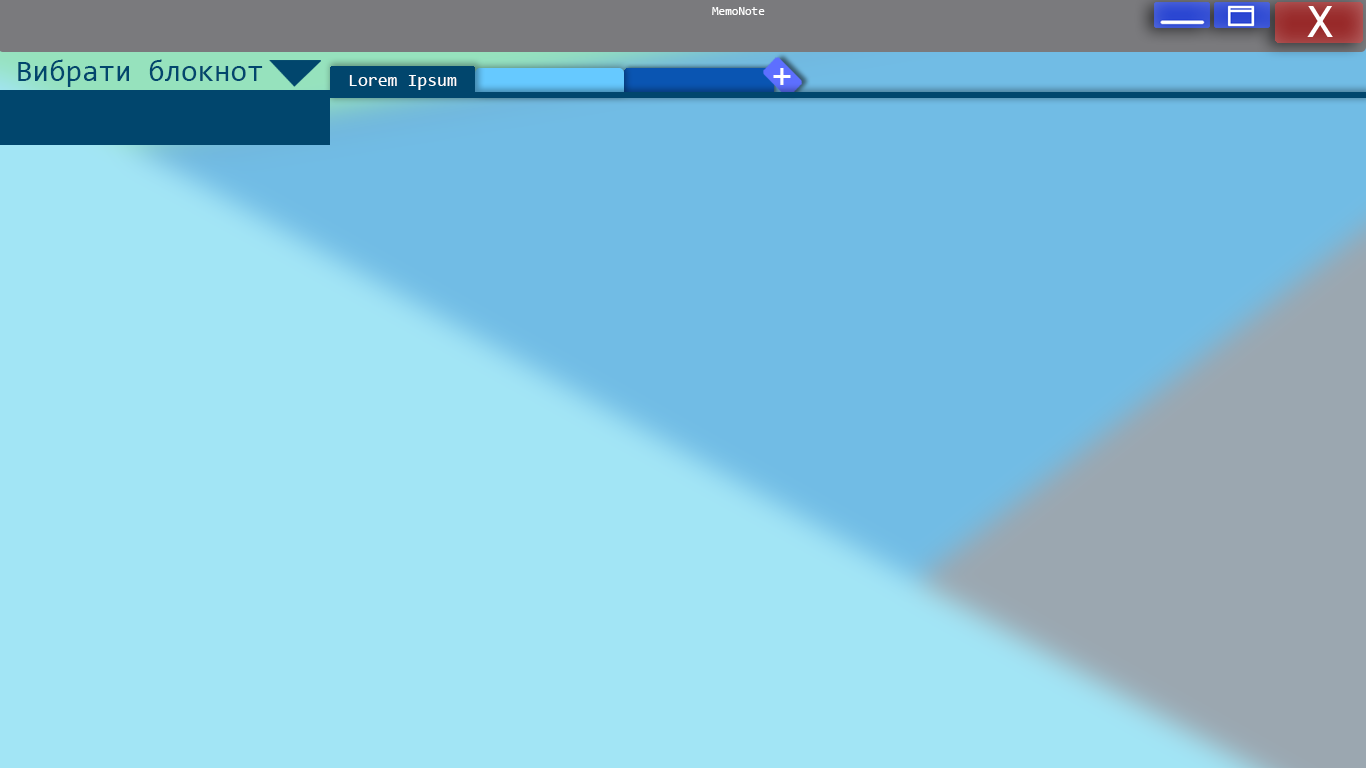
<style>
.page{position:relative;width:1366px;height:768px;background:#a2e5f5}
.page>*{position:absolute;margin:0}
.t1{font:12px "Consolas";color:#ffffff}
.t2{font:30px "Consolas";color:#01466d}
.t3{font:18px "Consolas";color:#ffffff}
.t4{font:36px "Consolas";color:#ffffff}
</style>
<div class="page">
<p class="t1" style="left:712px;top:7px;width:53px;height:8px">MemoNote</p>
<p class="t2" style="left:18px;top:59px;width:245px;height:28px">Вибрати блокнот</p>
<p class="t3" style="left:349px;top:75px;width:108px;height:15px">Lorem Ipsum</p>
<p class="t4" style="left:773px;top:68px;width:18px;height:17px">+</p>
</div>
